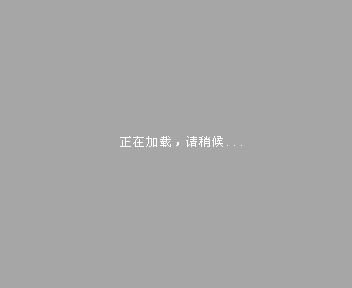
<style>
.page{position:relative;width:352px;height:288px;background:#a6a6a6}
.page>*{position:absolute;margin:0}
.t1{font:12px "SimSun";letter-spacing:0.1em;color:#ffffff}
</style>
<div class="page">
<p class="t1" style="left:120px;top:136px;width:122px;height:11px">正在加载，请稍候...</p>
</div>
